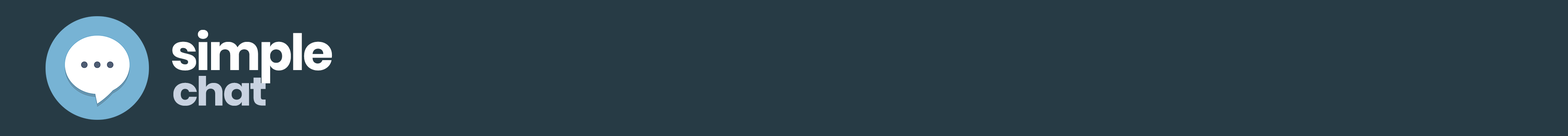
<style>
.page{position:relative;width:1568px;height:136px;background:#273b45}
.page>*{position:absolute;margin:0}
.t1{font:49.8px "Poppins-Bold";letter-spacing:-0.04em;color:#ffffff}
.t2{font:39.8px "Poppins-Bold";letter-spacing:-0.04em;color:#c8d2e0;scale:1.06 1}
</style>
<div class="page">
<p class="t1" style="left:172px;top:30px;width:160px;height:53px">simple</p>
<p class="t2" style="left:173px;top:76px;width:93px;height:30px">chat</p>
</div>
